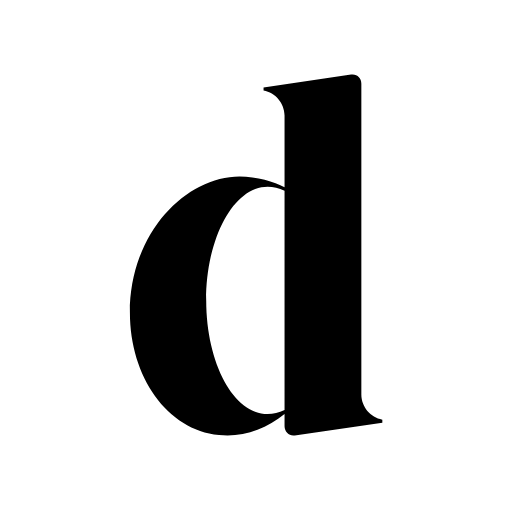
<style>
.page{position:relative;width:512px;height:512px;background:#ffffff}
.page>*{position:absolute;margin:0}
.t1{font:512px "Giaza";color:#000000}
</style>
<div class="page">
<p class="t1" style="left:129px;top:74px;width:254px;height:364px">d</p>
</div>
